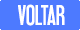
<style>
.page{position:relative;width:80px;height:30px;background:#4d7aff}
.page>*{position:absolute;margin:0}
.t1{font:25px "LibelSuit-Regular";letter-spacing:0.01em;color:#ffffff}
</style>
<div class="page">
<p class="t1" style="left:18px;top:4px;width:47px;height:22px">VOLTAR</p>
</div>
